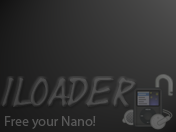
<style>
.page{position:relative;width:176px;height:132px}
.page>*{position:absolute;margin:0}
.t1{font:30px "Yearsupplyoffairycakes";color:#454545}
.t2{font:14px "MyriadPro-Regular";color:#575757}
</style>
<div class="page">
<p class="t1" style="left:2px;top:78px;width:134px;height:29px">iLoader</p>
<p class="t2" style="left:5px;top:116px;width:91px;height:13px">Free your Nano!</p>
</div>
